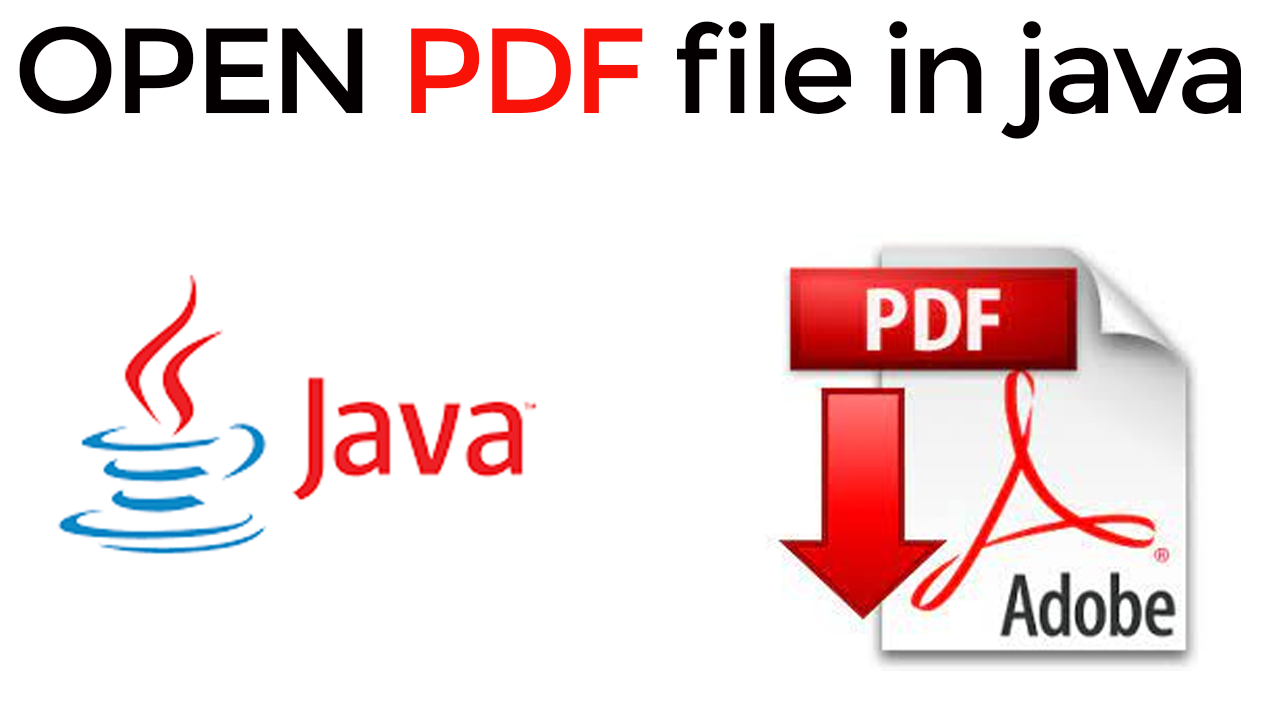
<style>
.page{position:relative;width:1280px;height:720px;background:#ffffff}
.page>*{position:absolute;margin:0}
.t1{font:121.3px "Montserrat-Regular";letter-spacing:-0.04em;color:#040002;scale:1.03 1}
.t2{font:121.3px "Montserrat-Regular";letter-spacing:-0.04em;color:#f91207;scale:1.03 1}
</style>
<div class="page">
<p class="t1" style="left:19px;top:21px;width:1222px;height:118px">OPEN <span class="t2">PDF</span> file in java</p>
</div>
